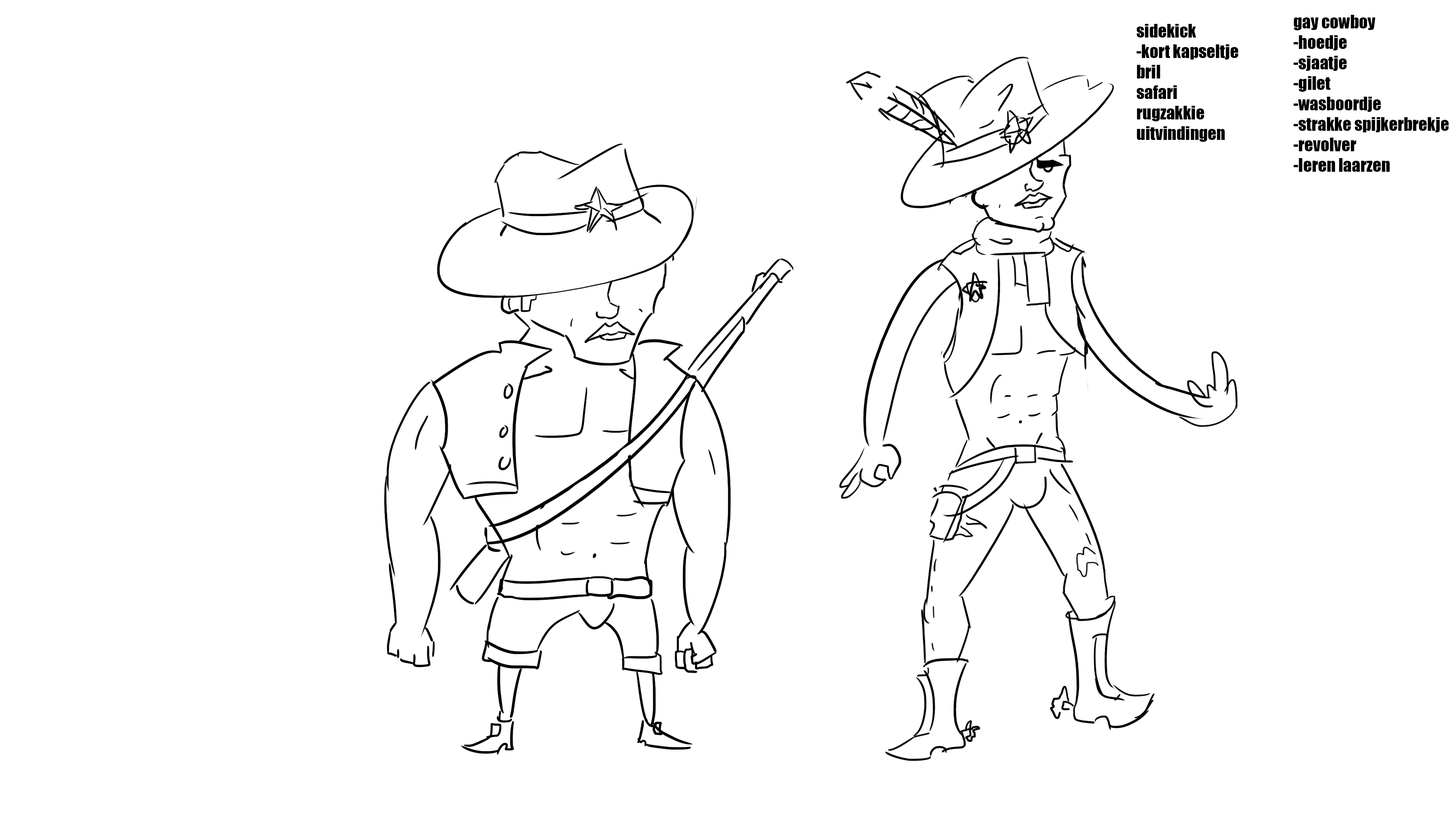
<style>
.page{position:relative;width:1456px;height:819px;background:#ffffff}
.page>*{position:absolute;margin:0}
.t1{font:17.1px "Impact";color:#000000}
</style>
<div class="page">
<p class="t1" style="left:1293px;top:15px;width:156px;height:157px">gay cowboy<br>-hoedje<br>-sjaatje<br>-gilet<br>-wasboordje<br>-strakke spijkerbrekje<br>-revolver<br>-leren laarzen</p>
<p class="t1" style="left:1136px;top:24px;width:102px;height:118px">sidekick<br>-kort kapseltje<br>bril<br>safari<br>rugzakkie<br>uitvindingen</p>
</div>
